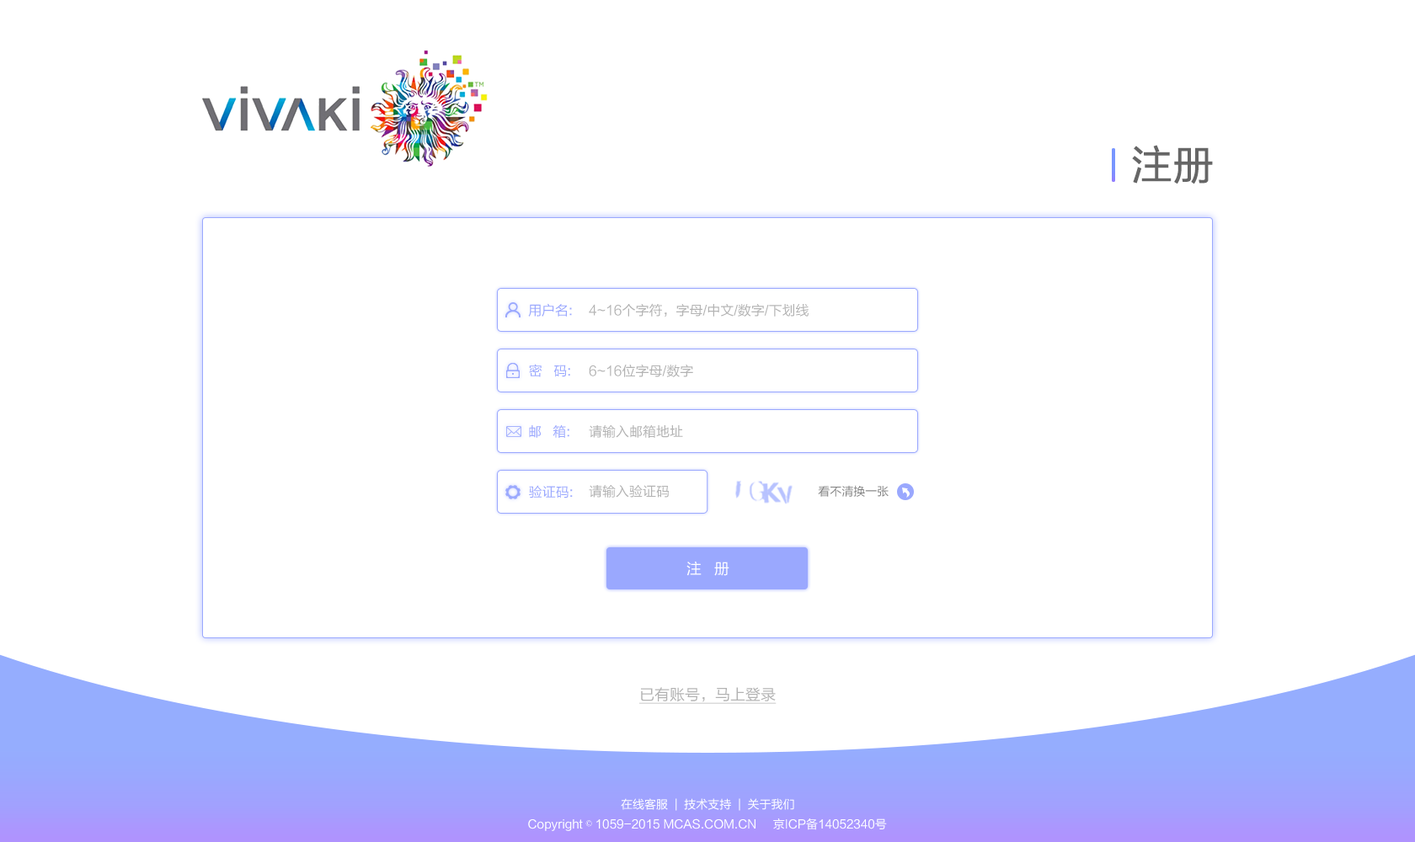
<style>
.page{position:relative;width:1415px;height:842px;background:#ffffff}
.page>*{position:absolute;margin:0}
.t1{font:40.4px "FZLTHJW--GB1-0";color:#666666;font-weight:bold}
.t2{font:13.5px "FZLTHJW--GB1-0";color:#9aa8fe}
.t3{font:13.5px "FZLTHJW--GB1-0";color:#b3b3b3}
.t4{font:11.8px "FZLTHJW--GB1-0";color:#808080}
.t5{font:15.2px "FZLTHJW--GB1-0";color:#ffffff}
.t6{font:15.2px "FZLTHJW--GB1-0";color:#b2b2b2;text-decoration:underline}
.t7{font:11.8px "FZLTHJW--GB1-0";color:#ffffff}
.t8{font:11.8px "SimSun";color:#ffffff}
</style>
<div class="page">
<p class="t1" style="left:1132px;top:145px;width:81px;height:40px">注册</p>
<p class="t2" style="left:528px;top:303px;width:44px;height:14px">用户名:</p>
<p class="t3" style="left:589px;top:303px;width:220px;height:15px">4~16个字符，字母/中文/数字/下划线</p>
<p class="t2" style="left:529px;top:364px;width:41px;height:13px">密   码:</p>
<p class="t3" style="left:589px;top:365px;width:104px;height:12px">6~16位字母/数字</p>
<p class="t2" style="left:529px;top:425px;width:41px;height:13px">邮   箱:</p>
<p class="t3" style="left:589px;top:425px;width:94px;height:13px">请输入邮箱地址</p>
<p class="t2" style="left:529px;top:485px;width:44px;height:14px">验证码:</p>
<p class="t3" style="left:589px;top:485px;width:80px;height:13px">请输入验证码</p>
<p class="t4" style="left:818px;top:485px;width:71px;height:12px">看不清换一张</p>
<p class="t5" style="left:687px;top:561px;width:43px;height:15px">注   册</p>
<p class="t6" style="left:639px;top:687px;width:138px;height:17px">已有账号，马上登录</p>
<p class="t7" style="left:621px;top:799px;width:173px;height:12px">在线客服  |  技术支持  |  关于我们</p>
<p class="t7" style="left:528px;top:819px;width:359px;height:13px">Copyright <span class="t8">©</span> 1059-2015 MCAS.COM.CN     京ICP备14052340号</p>
</div>
